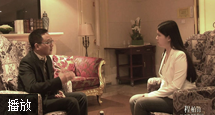
<style>
.page{position:relative;width:215px;height:115px}
.page>*{position:absolute;margin:0}
.t1{font:12px "SimSun";color:#ffffff}
</style>
<div class="page">
<p class="t1" style="left:8px;top:99px;width:23px;height:12px">播放</p>
</div>
